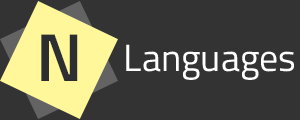
<style>
.page{position:relative;width:300px;height:120px;background:#333333}
.page>*{position:absolute;margin:0}
.t1{font:67.9px "TitilliumWeb-SemiBold";color:#2c2e31}
.t2{font:37.9px "TitilliumWeb-Regular";color:#ffffff}
</style>
<div class="page">
<p class="t1" style="left:41px;top:34px;width:37px;height:47px">N</p>
<p class="t2" style="left:126px;top:44px;width:168px;height:36px">Languages</p>
</div>
